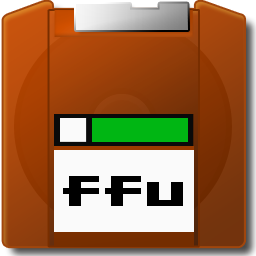
<style>
.page{position:relative;width:256px;height:256px}
.page>*{position:absolute;margin:0}
.t1{font:48px "04b09";color:#000000}
</style>
<div class="page">
<p class="t1" style="left:63px;top:176px;width:120px;height:30px">ffu</p>
</div>
